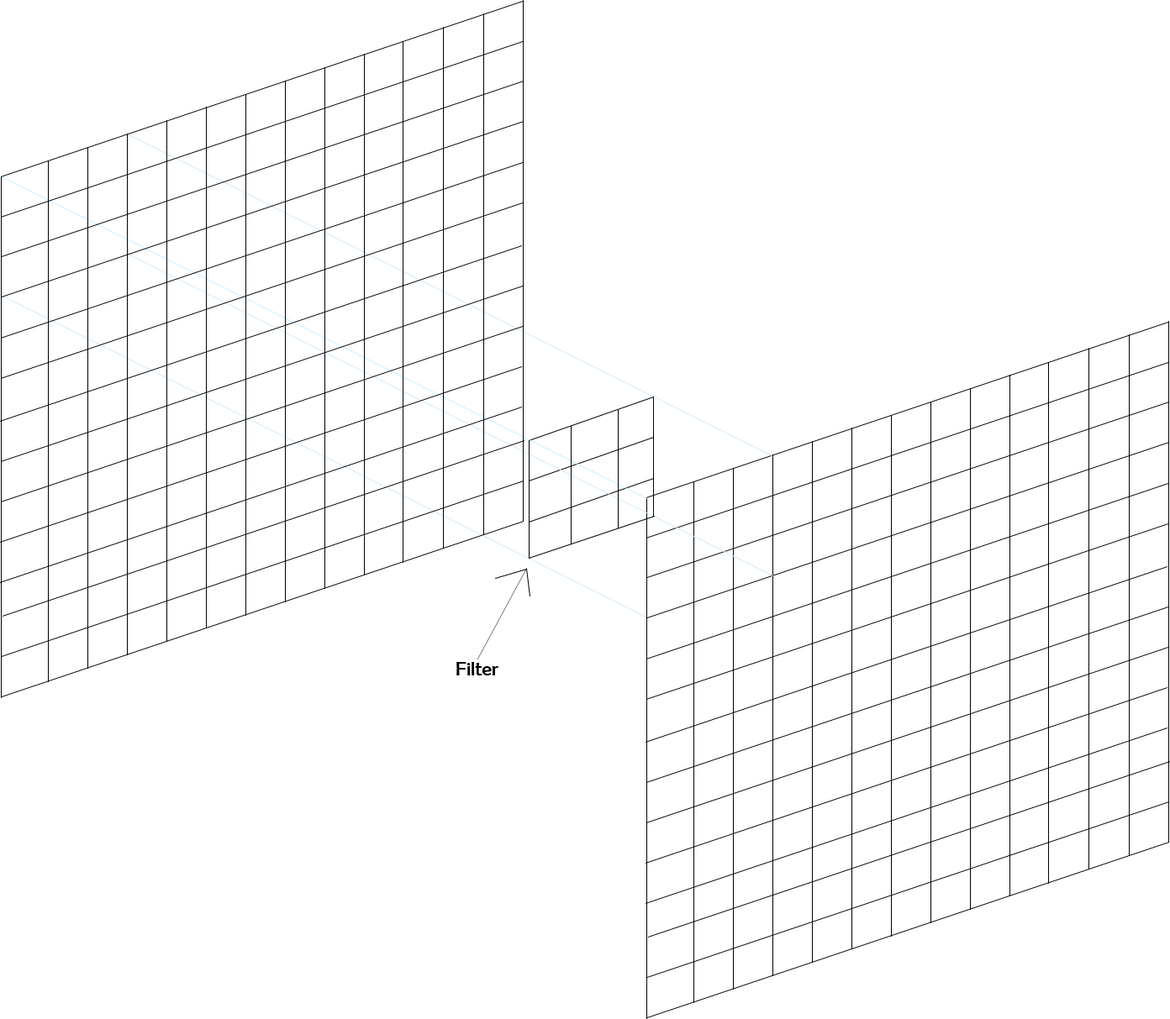
<style>
.page{position:relative;width:1170px;height:1019px;background:#ffffff}
.page>*{position:absolute;margin:0}
.t1{font:20.2px "BerlinSansFB-Reg";color:#000000}
</style>
<div class="page">
<p class="t1" style="left:456px;top:662px;width:42px;height:14px">Filter</p>
</div>
